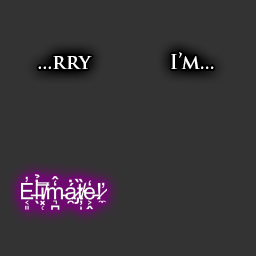
<style>
.page{position:relative;width:256px;height:256px;background:#333333}
.page>*{position:absolute;margin:0}
.t1{font:20px "TrajanPro-Bold";color:#ffffff}
</style>
<div class="page">
<p class="t1" style="left:171px;top:52px;width:43px;height:17px">I’m...</p>
<p class="t1" style="left:38px;top:56px;width:54px;height:13px">...rry</p>
</div>
